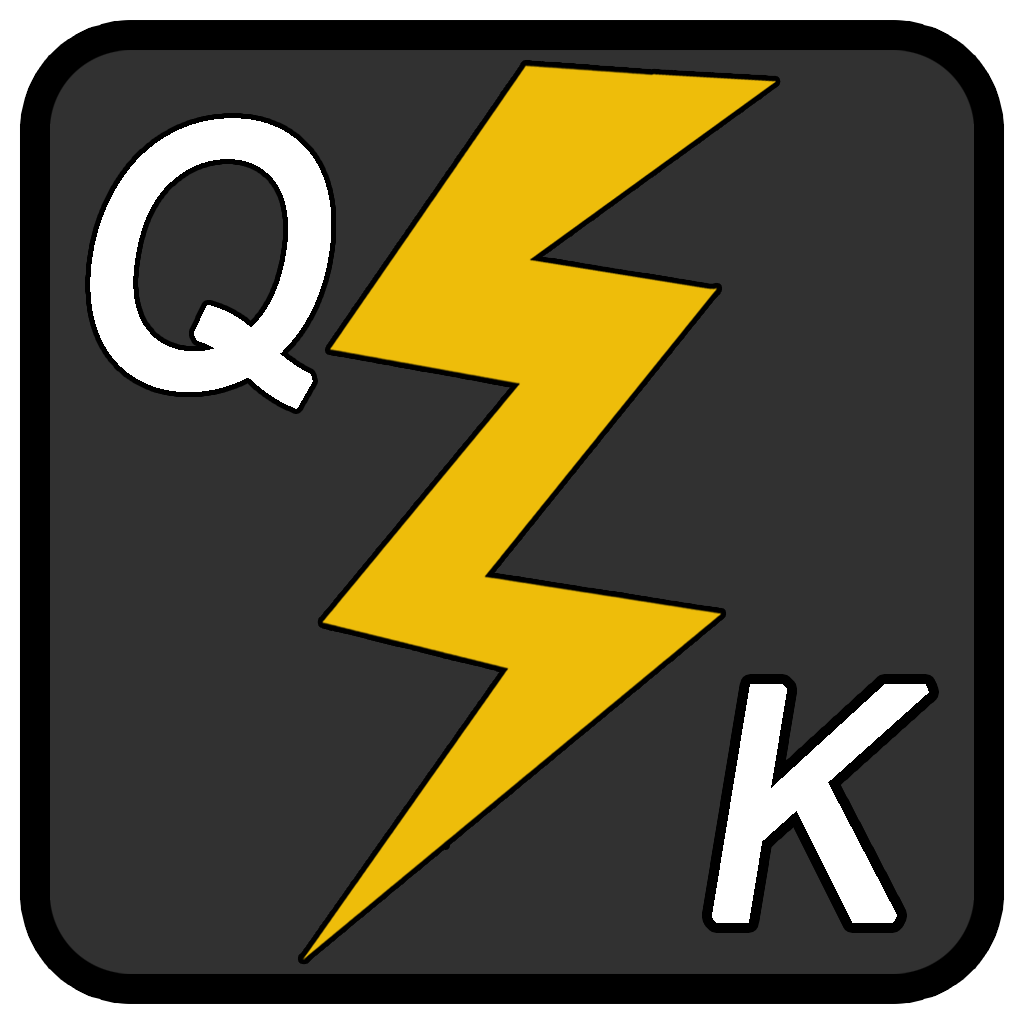
<style>
.page{position:relative;width:1024px;height:1024px;background:#313131}
.page>*{position:absolute;margin:0}
.t1{font:355.7px "ArialMT";color:#ffffff;font-weight:bold;font-style:italic;scale:0.93 1}
.t2{font:320.5px "ArialMT";color:#ffffff;font-weight:bold;font-style:italic;scale:0.93 1}
</style>
<div class="page">
<p class="t1" style="left:90px;top:118px;width:241px;height:291px">Q</p>
<p class="t2" style="left:712px;top:684px;width:217px;height:239px">K</p>
</div>
